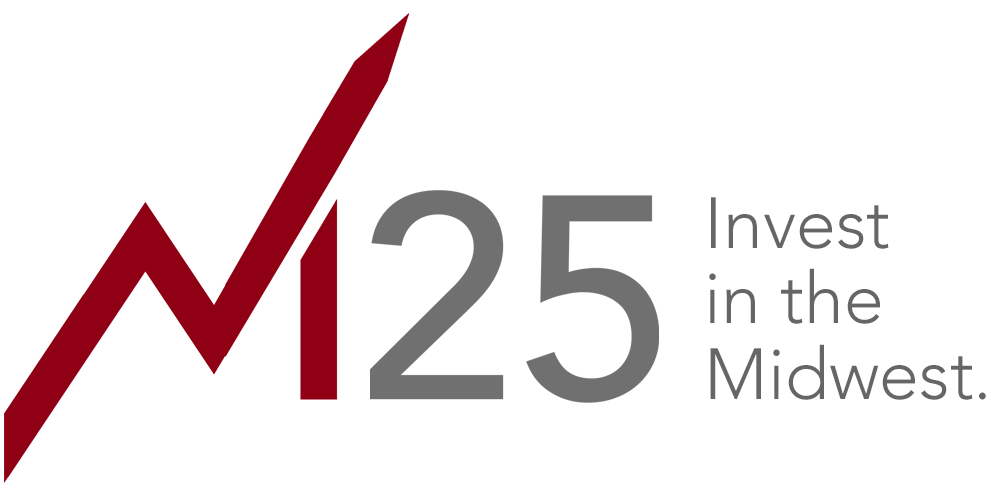
<style>
.page{position:relative;width:1000px;height:500px;background:#ffffff}
.page>*{position:absolute;margin:0}
.t1{font:287.8px "Avenir-Medium";color:#707070}
.t2{font:71.6px/75.5px "Avenir-Light";color:#666666}
</style>
<div class="page">
<p class="t1" style="left:370px;top:190px;width:289px;height:213px">25</p>
<p class="t2" style="left:709px;top:197px;width:277px;height:203px">Invest <br>in the <br>Midwest.</p>
</div>
